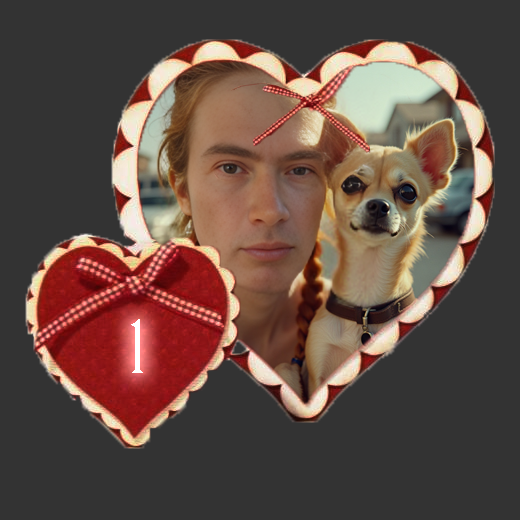
<style>
.page{position:relative;width:520px;height:520px;background:#333333}
.page>*{position:absolute;margin:0}
.t1{font:72px "BirchStd";color:#ffffff}
</style>
<div class="page">
<p class="t1" style="left:131px;top:319px;width:12px;height:54px">1</p>
</div>
